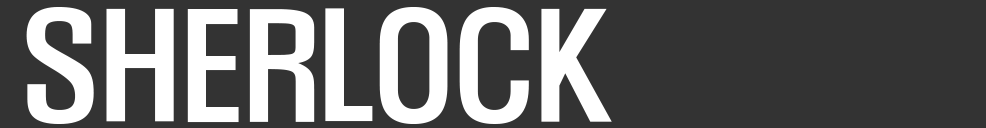
<style>
.page{position:relative;width:986px;height:128px;background:#333333}
.page>*{position:absolute;margin:0}
.t1{font:132.7px "H2hdrM";color:#ffffff}
</style>
<div class="page">
<p class="t1" style="left:26px;top:7px;width:586px;height:117px">SHERLOCK</p>
</div>
